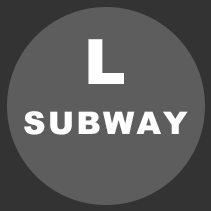
<style>
.page{position:relative;width:211px;height:211px;background:#5d5d5d}
.page>*{position:absolute;margin:0}
.t1{font:31.2px/50px "Arial-Black";letter-spacing:0.075em;color:#ffffff}
.t2{font:37.5px/50px "Arial-Black";letter-spacing:0.075em;color:#ffffff}
.t3{font:62.5px/50px "Arial-Black";letter-spacing:0.075em;color:#ffffff}
</style>
<div class="page">
<p class="t1" style="left:24px;top:39px;width:164px;height:96px;text-align:center"><span class="t2"><br></span><span class="t3">L<br></span>SUBWAY</p>
</div>
